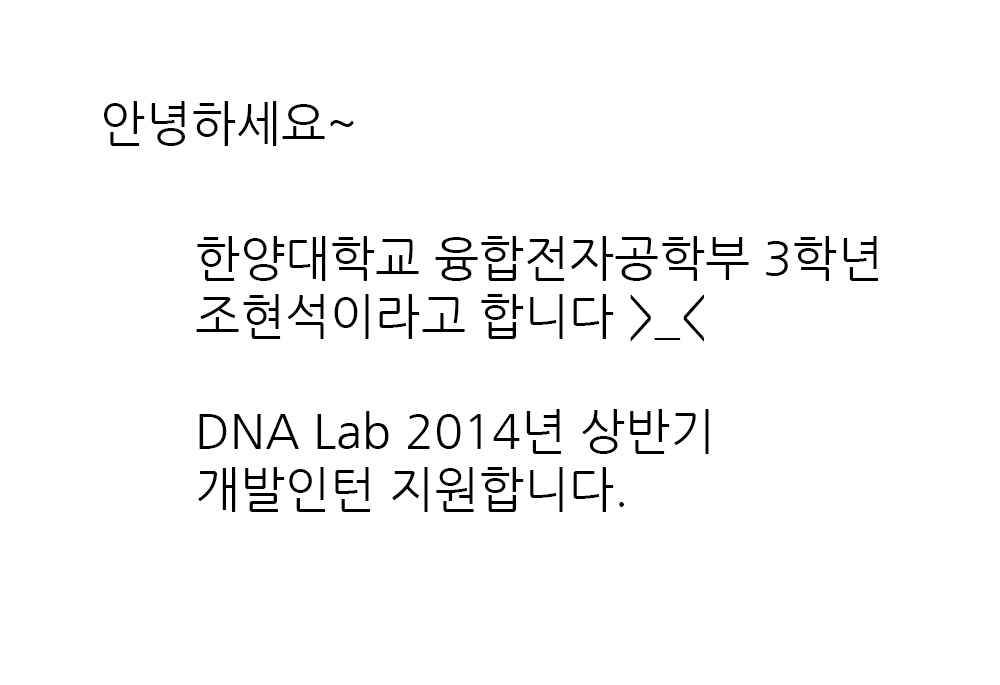
<style>
.page{position:relative;width:1000px;height:685px;background:#ffffff}
.page>*{position:absolute;margin:0}
.t1{font:48px "NanumGothic";color:#000000}
</style>
<div class="page">
<p class="t1" style="left:104px;top:101px;width:250px;height:45px">안녕하세요~</p>
<p class="t1" style="left:196px;top:236px;width:683px;height:276px">한양대학교 융합전자공학부 3학년<br>조현석이라고 합니다 &gt;_&lt;<br><br>DNA Lab 2014년 상반기 <br>개발인턴 지원합니다.</p>
</div>
